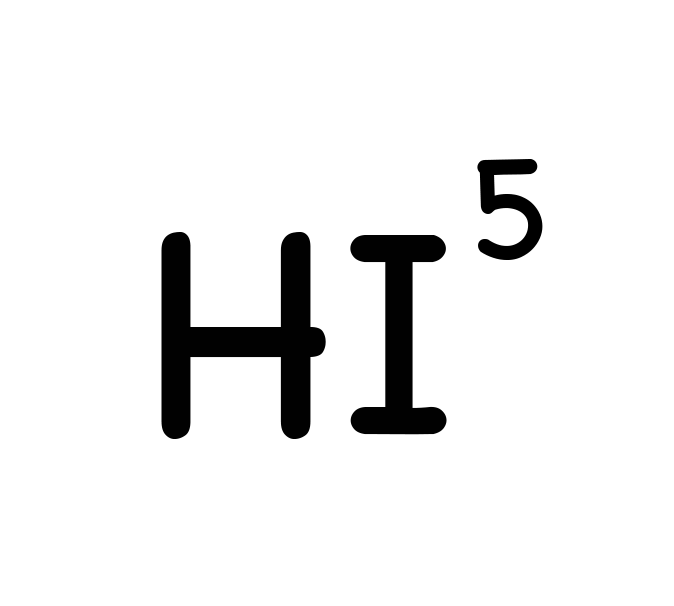
<style>
.page{position:relative;width:674px;height:606px;background:#ffffff}
.page>*{position:absolute;margin:0}
.t1{font:150px "Chalkboard";color:#000000}
.t2{font:300px "Chalkboard";color:#010101}
</style>
<div class="page">
<p class="t1" style="left:477px;top:159px;width:66px;height:101px">5</p>
<p class="t2" style="left:161px;top:232px;width:286px;height:207px">HI</p>
</div>
